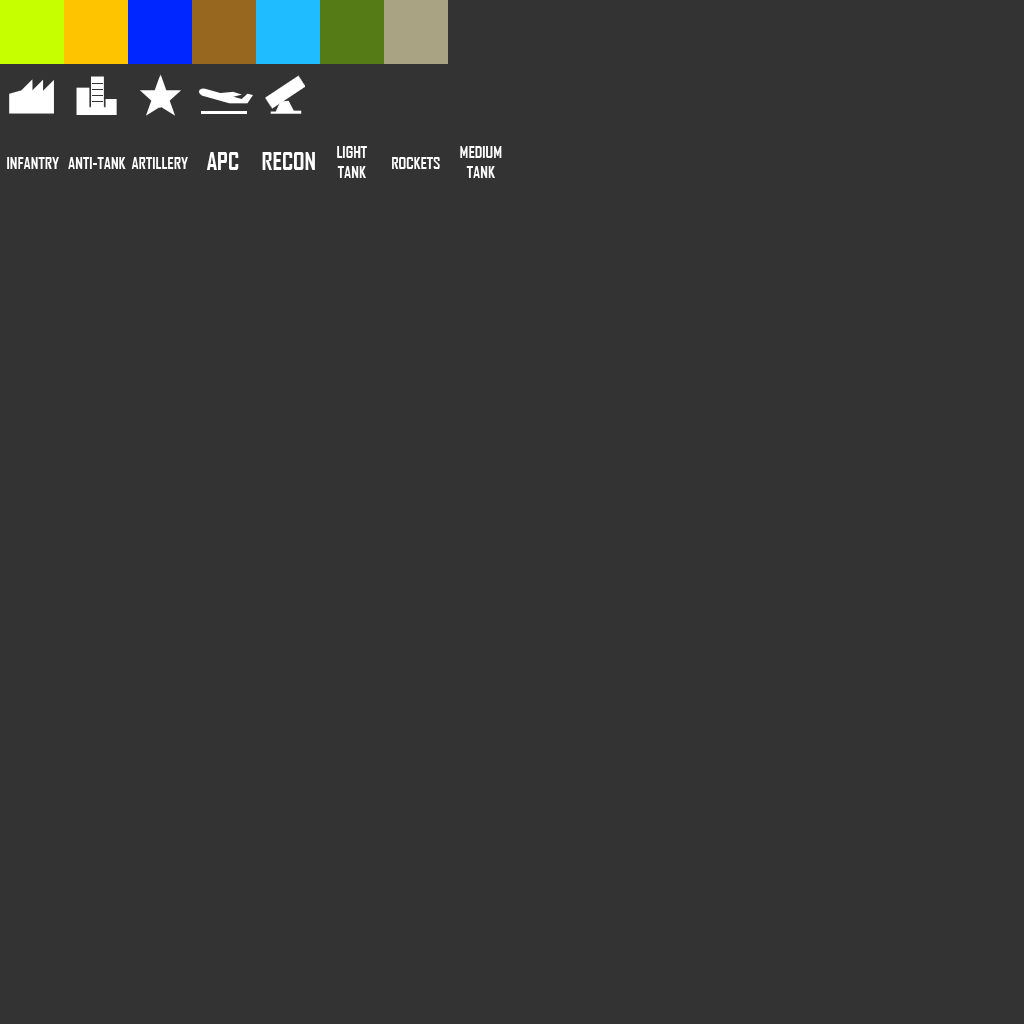
<style>
.page{position:relative;width:1024px;height:1024px;background:#333333}
.page>*{position:absolute;margin:0}
.t1{font:16px "AgencyFB-Bold";color:#ffffff}
.t2{font:24px "AgencyFB-Bold";color:#ffffff}
</style>
<div class="page">
<p class="t1" style="left:337px;top:146px;width:30px;height:32px;text-align:center">LIGHT<br>TANK</p>
<p class="t1" style="left:460px;top:146px;width:42px;height:32px;text-align:center">MEDIUM<br>TANK</p>
<p class="t1" style="left:7px;top:157px;width:52px;height:12px">INFANTRY</p>
<p class="t1" style="left:68px;top:157px;width:58px;height:12px">ANTI-TANK</p>
<p class="t1" style="left:131px;top:157px;width:57px;height:12px">ARTILLERY</p>
<p class="t2" style="left:206px;top:152px;width:33px;height:18px">APC</p>
<p class="t2" style="left:262px;top:152px;width:53px;height:18px">RECON</p>
<p class="t1" style="left:392px;top:157px;width:48px;height:12px">ROCKETS</p>
</div>
